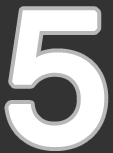
<style>
.page{position:relative;width:113px;height:153px;background:#333333}
.page>*{position:absolute;margin:0}
.t1{font:188.1px "Swiss721BT-Roman";color:#ffffff;font-weight:bold}
</style>
<div class="page">
<p class="t1" style="left:8px;top:10px;width:97px;height:137px">5</p>
</div>
